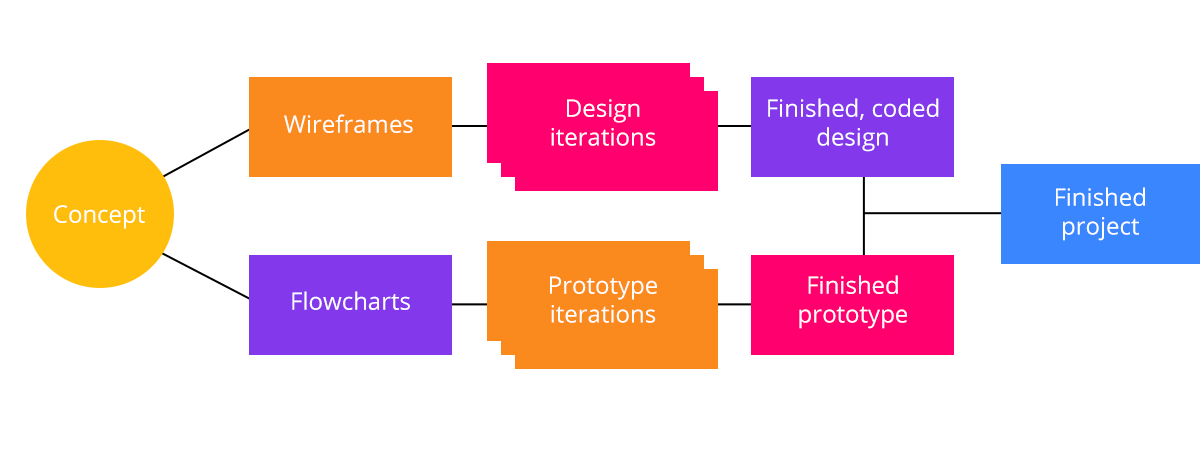
<style>
.page{position:relative;width:1200px;height:450px;background:#ffffff}
.page>*{position:absolute;margin:0}
.t1{font:24px "OpenSans-Regular";color:#ffffff}
</style>
<div class="page">
<p class="t1" style="left:551px;top:99px;width:105px;height:47px;text-align:center">Design iterations</p>
<p class="t1" style="left:768px;top:98px;width:171px;height:54px;text-align:center">Finished, coded design</p>
<p class="t1" style="left:284px;top:114px;width:129px;height:19px">Wireframes</p>
<p class="t1" style="left:1056px;top:187px;width:89px;height:54px;text-align:center">Finished project</p>
<p class="t1" style="left:54px;top:205px;width:91px;height:24px">Concept</p>
<p class="t1" style="left:550px;top:276px;width:107px;height:47px;text-align:center">Prototype iterations</p>
<p class="t1" style="left:799px;top:275px;width:108px;height:54px;text-align:center">Finished prototype</p>
<p class="t1" style="left:292px;top:291px;width:118px;height:19px">Flowcharts</p>
</div>
